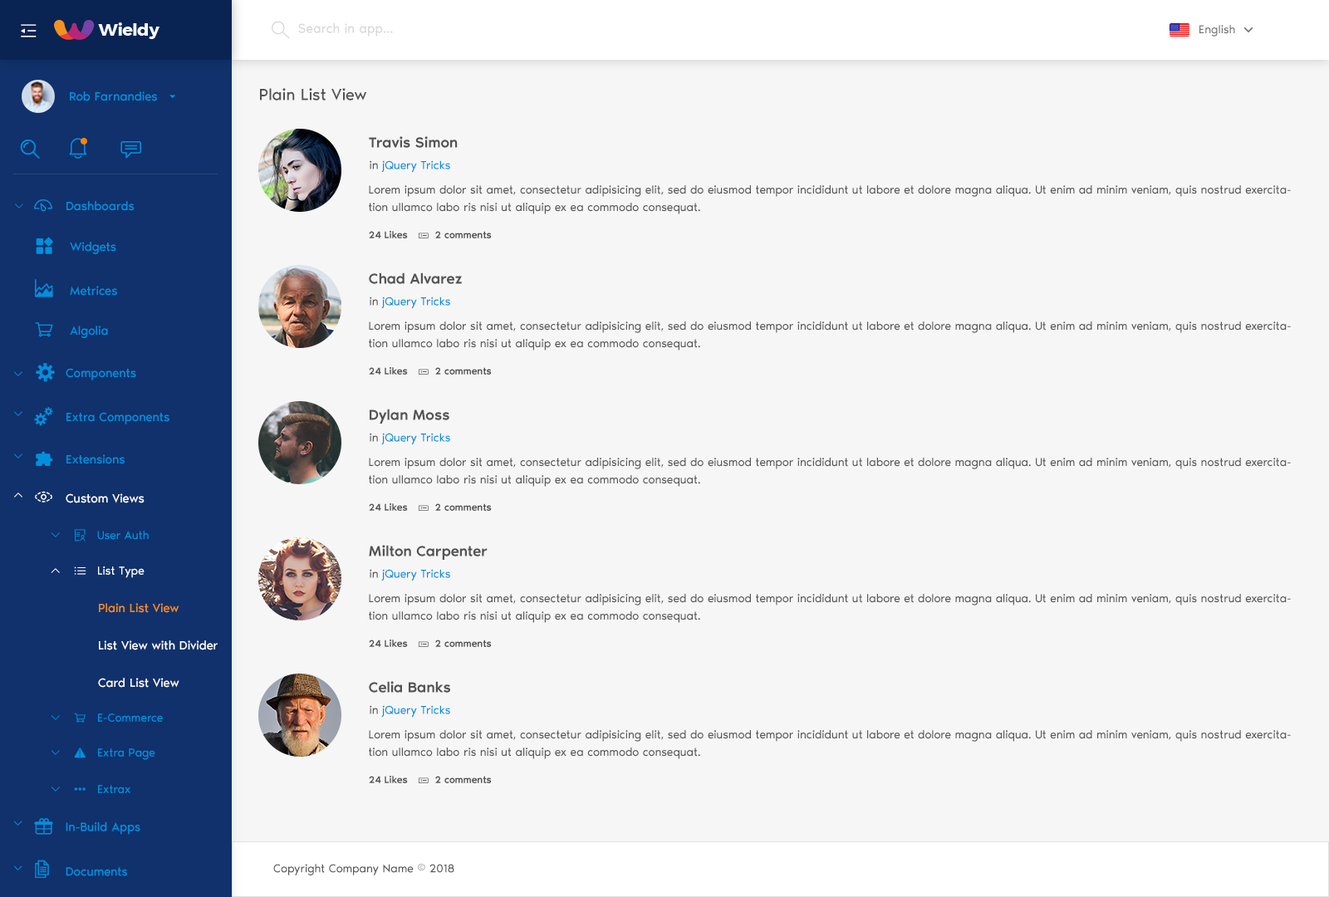
<style>
.page{position:relative;width:1329px;height:897px;background:#f6f6f6}
.page>*{position:absolute;margin:0}
.t1{font:13.3px "NoirPro-Regular";color:#d9d9d9}
.t2{font:11.6px "NoirPro-Regular";color:#757575}
.t3{font:16.6px "NoirPro-Regular";color:#535353}
.t4{font:12.5px "NoirPro-Regular";color:#038fde}
.t5{font:15px "NoirPro-Medium";color:#535353}
.t6{font:11.6px "NoirPro-Regular";color:#038fde}
.t7{font:11.6px "NoirPro-Regular";color:#595959}
.t8{font:11.6px/17.4px "NoirPro-Regular";color:#595959}
.t9{font:10px "gaxonant"}
.t10{font:18.3px "gaxonant";color:#038fde}
.t11{font:10px "NoirPro-Medium";color:#535353}
.t12{font:9.7px "gaxonant";color:#038fde}
.t13{font:18.3px "gaxonant";color:#ffffff}
.t14{font:12.5px "NoirPro-Regular";color:#ffffff}
.t15{font:10px "gaxonant";color:#038fde}
.t16{font:11.6px "gaxonant";color:#038fde}
.t17{font:10px "gaxonant";color:#ffffff}
.t18{font:11.6px "gaxonant";color:#ffffff}
.t19{font:11.6px "NoirPro-Regular";color:#ffffff}
.t20{font:12.5px/33.2px "NoirPro-Regular";color:#ffffff}
.t21{font:12.5px/33.2px "NoirPro-Regular";color:#fa8c16}
.t22{font:12.4px "NoirPro-Regular";color:#038fde}
.t23{font:18.2px "gaxonant";color:#038fde}
</style>
<div class="page">
<p class="t1" style="left:298px;top:23px;width:95px;height:14px">Search in app...</p>
<p class="t2" style="left:1200px;top:25px;width:35px;height:12px">English</p>
<p class="t3" style="left:260px;top:88px;width:107px;height:13px">Plain List View</p>
<p class="t4" style="left:70px;top:91px;width:87px;height:10px">Rob Farnandies</p>
<p class="t5" style="left:369px;top:136px;width:89px;height:12px">Travis Simon</p>
<p class="t6" style="left:370px;top:160px;width:80px;height:13px"><span class="t7">in </span>jQuery Tricks</p>
<p class="t8" style="left:369px;top:185px;width:922px;height:29px">Lorem ipsum dolor sit amet, consectetur adipisicing elit, sed do eiusmod tempor incididunt ut labore et dolore magna aliqua. Ut enim ad minim veniam, quis nostrud exercitation ullamco labo ris nisi ut aliquip ex ea commodo consequat.</p>
<p class="t9" style="left:15px;top:204px;width:8px;height:5px">2</p>
<p class="t10" style="left:34px;top:199px;width:18px;height:13px">-</p>
<p class="t4" style="left:66px;top:201px;width:69px;height:10px">Dashboards</p>
<p class="t11" style="left:369px;top:231px;width:123px;height:7px">24 Likes         2 comments</p>
<p class="t4" style="left:70px;top:242px;width:46px;height:12px">Widgets</p>
<p class="t10" style="left:35px;top:279px;width:18px;height:18px">m</p>
<p class="t5" style="left:369px;top:272px;width:93px;height:12px">Chad Alvarez</p>
<p class="t4" style="left:70px;top:286px;width:47px;height:10px">Metrices</p>
<p class="t6" style="left:370px;top:297px;width:80px;height:12px"><span class="t7">in </span>jQuery Tricks</p>
<p class="t4" style="left:70px;top:326px;width:38px;height:12px">Algolia</p>
<p class="t8" style="left:369px;top:321px;width:922px;height:30px">Lorem ipsum dolor sit amet, consectetur adipisicing elit, sed do eiusmod tempor incididunt ut labore et dolore magna aliqua. Ut enim ad minim veniam, quis nostrud exercitation ullamco labo ris nisi ut aliquip ex ea commodo consequat.</p>
<p class="t10" style="left:36px;top:363px;width:19px;height:19px">%</p>
<p class="t12" style="left:14px;top:371px;width:8px;height:5px">2</p>
<p class="t4" style="left:66px;top:368px;width:70px;height:12px">Components</p>
<p class="t11" style="left:369px;top:367px;width:123px;height:8px">24 Likes         2 comments</p>
<p class="t12" style="left:14px;top:411px;width:8px;height:5px">2</p>
<p class="t4" style="left:66px;top:412px;width:103px;height:12px">Extra Components</p>
<p class="t5" style="left:370px;top:409px;width:79px;height:15px">Dylan Moss</p>
<p class="t6" style="left:370px;top:433px;width:80px;height:12px"><span class="t7">in </span>jQuery Tricks</p>
<p class="t12" style="left:14px;top:454px;width:8px;height:5px">2</p>
<p class="t4" style="left:66px;top:454px;width:59px;height:10px">Extensions</p>
<p class="t8" style="left:369px;top:458px;width:922px;height:29px">Lorem ipsum dolor sit amet, consectetur adipisicing elit, sed do eiusmod tempor incididunt ut labore et dolore magna aliqua. Ut enim ad minim veniam, quis nostrud exercitation ullamco labo ris nisi ut aliquip ex ea commodo consequat.</p>
<p class="t9" style="left:14px;top:493px;width:8px;height:5px">5</p>
<p class="t13" style="left:35px;top:491px;width:17px;height:12px">,</p>
<p class="t14" style="left:66px;top:493px;width:79px;height:10px">Custom Views</p>
<p class="t11" style="left:369px;top:503px;width:123px;height:8px">24 Likes         2 comments</p>
<p class="t15" style="left:52px;top:532px;width:8px;height:5px">2</p>
<p class="t16" style="left:75px;top:529px;width:11px;height:13px">r</p>
<p class="t6" style="left:97px;top:531px;width:52px;height:9px">User Auth</p>
<p class="t5" style="left:369px;top:545px;width:119px;height:15px">Milton Carpenter</p>
<p class="t17" style="left:51px;top:568px;width:9px;height:5px">5</p>
<p class="t18" style="left:74px;top:567px;width:12px;height:8px">h</p>
<p class="t19" style="left:98px;top:567px;width:47px;height:11px">List Type</p>
<p class="t6" style="left:370px;top:569px;width:80px;height:12px"><span class="t7">in </span>jQuery Tricks</p>
<p class="t8" style="left:369px;top:594px;width:922px;height:29px">Lorem ipsum dolor sit amet, consectetur adipisicing elit, sed do eiusmod tempor incididunt ut labore et dolore magna aliqua. Ut enim ad minim veniam, quis nostrud exercitation ullamco labo ris nisi ut aliquip ex ea commodo consequat.</p>
<p class="t20" style="left:98px;top:603px;width:120px;height:85px"><span class="t21">Plain List View<br></span>List View with Divider<br>Card List View</p>
<p class="t11" style="left:369px;top:640px;width:123px;height:7px">24 Likes         2 comments</p>
<p class="t5" style="left:369px;top:681px;width:81px;height:12px">Celia Banks</p>
<p class="t6" style="left:98px;top:714px;width:65px;height:8px">E-Commerce</p>
<p class="t6" style="left:370px;top:705px;width:80px;height:13px"><span class="t7">in </span>jQuery Tricks</p>
<p class="t15" style="left:52px;top:715px;width:8px;height:5px">2</p>
<p class="t8" style="left:369px;top:730px;width:922px;height:29px">Lorem ipsum dolor sit amet, consectetur adipisicing elit, sed do eiusmod tempor incididunt ut labore et dolore magna aliqua. Ut enim ad minim veniam, quis nostrud exercitation ullamco labo ris nisi ut aliquip ex ea commodo consequat.</p>
<p class="t16" style="left:74px;top:748px;width:12px;height:10px">~</p>
<p class="t6" style="left:98px;top:748px;width:57px;height:12px">Extra Page</p>
<p class="t15" style="left:52px;top:750px;width:8px;height:5px">2</p>
<p class="t6" style="left:98px;top:785px;width:32px;height:8px">Extrax</p>
<p class="t11" style="left:369px;top:776px;width:123px;height:7px">24 Likes         2 comments</p>
<p class="t15" style="left:52px;top:787px;width:8px;height:5px">2</p>
<p class="t16" style="left:74px;top:788px;width:12px;height:3px">{</p>
<p class="t12" style="left:13px;top:821px;width:9px;height:5px">2</p>
<p class="t22" style="left:66px;top:822px;width:74px;height:13px">In-Build Apps</p>
<p class="t12" style="left:13px;top:866px;width:9px;height:5px">2</p>
<p class="t23" style="left:35px;top:860px;width:14px;height:18px">)</p>
<p class="t22" style="left:66px;top:867px;width:61px;height:9px">Documents</p>
<p class="t7" style="left:273px;top:864px;width:181px;height:12px">Copyright Company Name © 2018</p>
</div>
